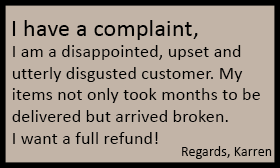
<style>
.page{position:relative;width:280px;height:168px;background:#c2b4a7}
.page>*{position:absolute;margin:0}
.t1{font:24px "Calibri";letter-spacing:0.01em;color:#000000}
.t2{font:18px "Calibri";letter-spacing:0.01em;color:#000000}
.t3{font:14px "Calibri";letter-spacing:0.01em;color:#000000}
</style>
<div class="page">
<p class="t1" style="left:12px;top:20px;width:186px;height:20px">I have a complaint,</p>
<p class="t2" style="left:12px;top:45px;width:248px;height:99px">I am a disappointed, upset and <br>utterly disgusted customer. My <br>items not only took months to be <br>delivered but arrived broken. <br>I want a full refund!</p>
<p class="t3" style="left:182px;top:146px;width:90px;height:13px">Regards, Karren</p>
</div>
